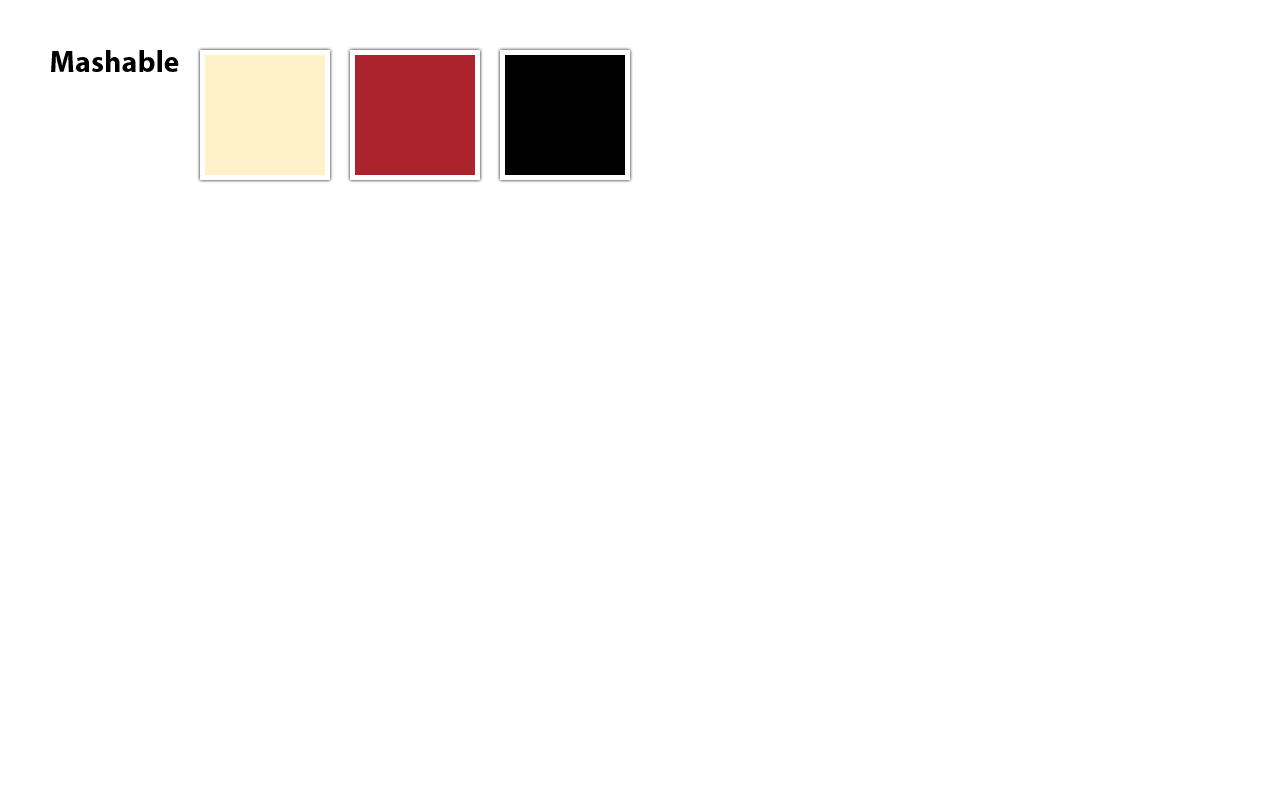
<style>
.page{position:relative;width:1280px;height:800px;background:#ffffff}
.page>*{position:absolute;margin:0}
.t1{font:30px "MyriadPro-Bold";color:#000000}
</style>
<div class="page">
<p class="t1" style="left:51px;top:50px;width:128px;height:22px">Mashable</p>
</div>
